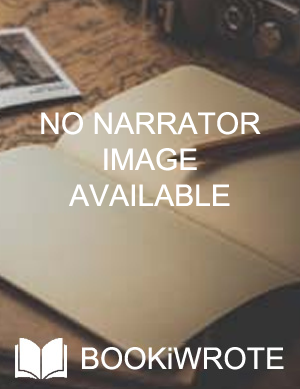
<style>
.page{position:relative;width:300px;height:389px}
.page>*{position:absolute;margin:0}
.t1{font:30px "ArialMT";color:#ffffff}
</style>
<div class="page">
<p class="t1" style="left:41px;top:112px;width:220px;height:94px;text-align:center">NO NARRATOR<br>IMAGE<br>AVAILABLE</p>
</div>
